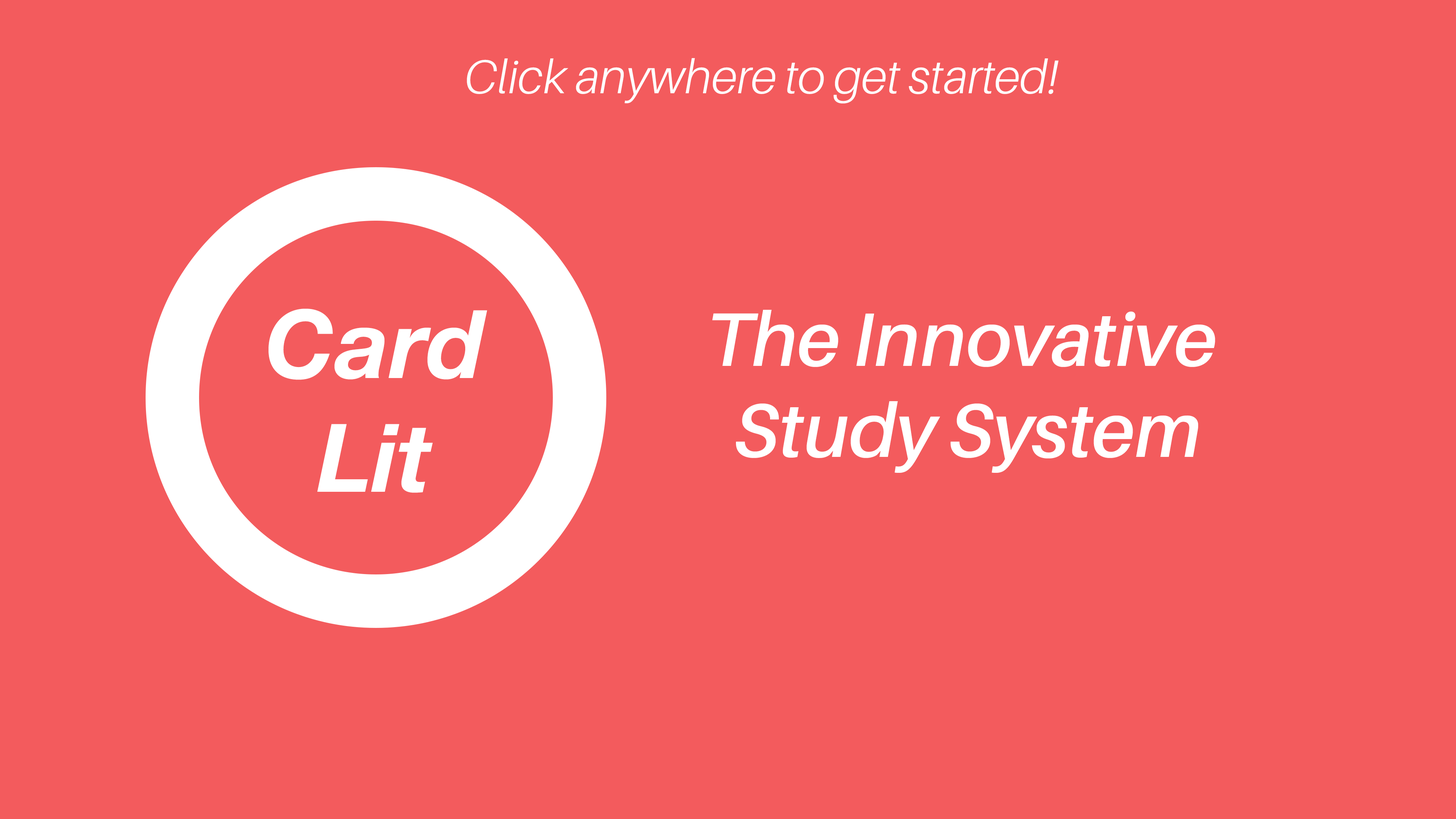
<style>
.page{position:relative;width:1456px;height:819px;background:#f35b5d}
.page>*{position:absolute;margin:0}
.t1{font:47.4px "Aileron-LightItalic";color:#fefefe}
.t2{font:94.8px "HelveticaNeueLTStd-BdIt";color:#ffffff}
.t3{font:75.8px "Aileron-SemiBoldItalic";color:#ffffff}
</style>
<div class="page">
<p class="t1" style="left:467px;top:58px;width:592px;height:46px">Click anywhere to get started!</p>
<p class="t2" style="left:268px;top:309px;width:219px;height:184px;text-align:center">Card<br>Lit</p>
<p class="t3" style="left:712px;top:310px;width:503px;height:163px;text-align:center">The Innovative <br>Study System</p>
</div>
